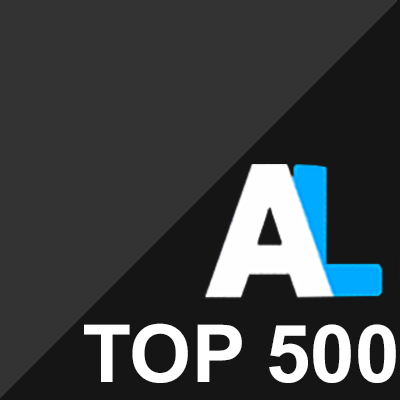
<style>
.page{position:relative;width:400px;height:400px;background:#333333}
.page>*{position:absolute;margin:0}
.t1{font:80px "Arial-BoldMT";color:#ffffff}
</style>
<div class="page">
<p class="t1" style="left:84px;top:323px;width:312px;height:60px">TOP 500</p>
</div>
